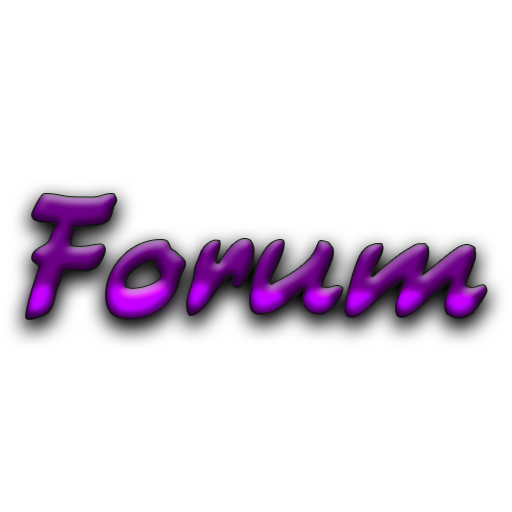
<style>
.page{position:relative;width:512px;height:512px;background:#ffffff}
.page>*{position:absolute;margin:0}
.t1{font:179.2px "CATKurier";color:#6d0088}
</style>
<div class="page">
<p class="t1" style="left:26px;top:194px;width:461px;height:125px">Forum</p>
</div>
